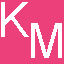
<style>
.page{position:relative;width:64px;height:64px;background:#ec407a}
.page>*{position:absolute;margin:0}
.t1{font:48px "ArialMT";color:#ffffff}
</style>
<div class="page">
<p class="t1" style="left:1px;top:2px;width:28px;height:35px">K</p>
<p class="t1" style="left:31px;top:23px;width:31px;height:35px">M</p>
</div>
